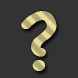
<style>
.page{position:relative;width:78px;height:78px;background:#333333}
.page>*{position:absolute;margin:0}
.t1{font:87.8px "ChalkboardSE-Regular"}
</style>
<div class="page">
<p class="t1" style="left:21px;top:11px;width:36px;height:60px">?</p>
</div>
